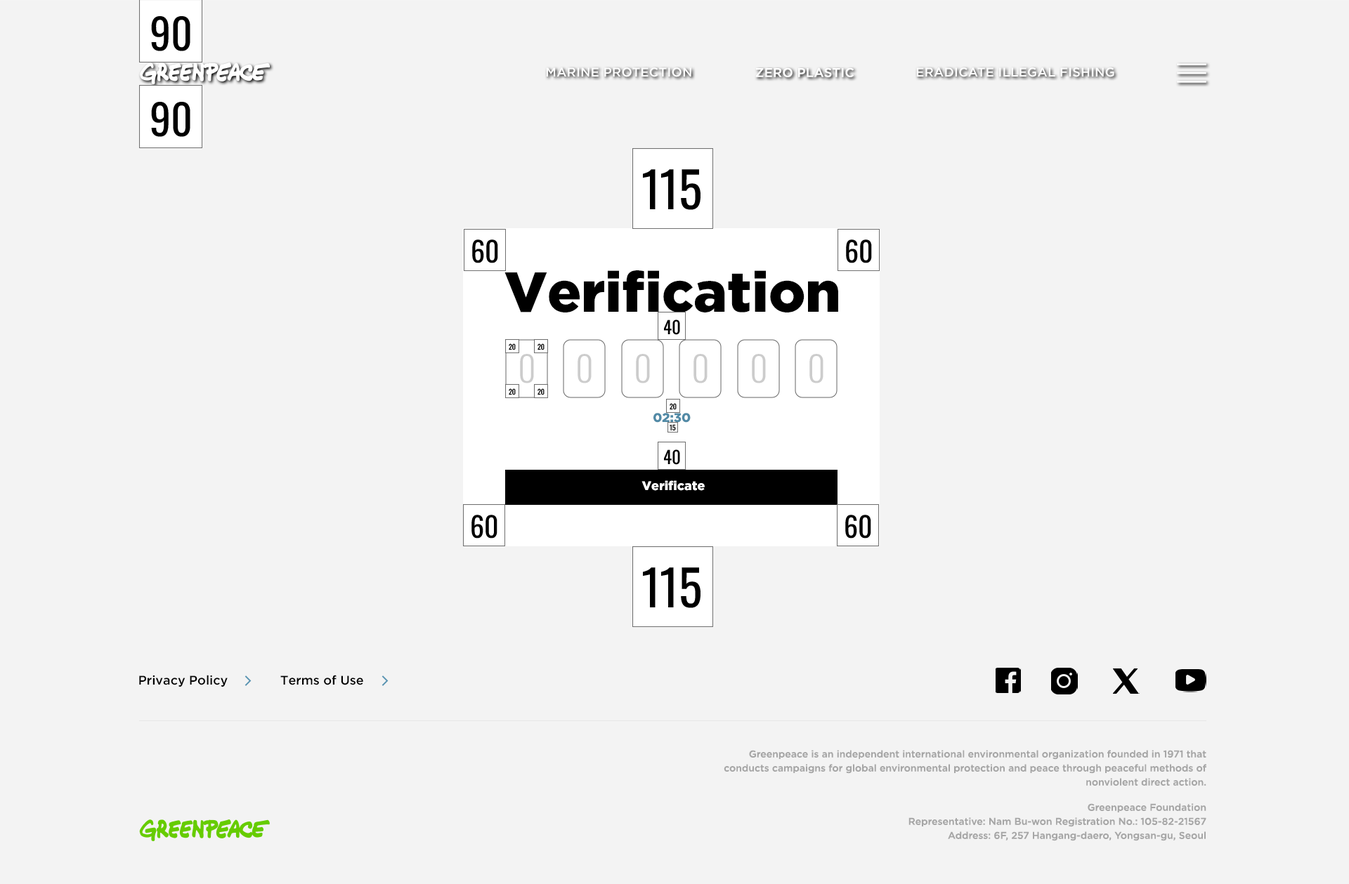
<style>
.page{position:relative;width:1349px;height:884px;background:#f3f3f3}
.page>*{position:absolute;margin:0}
.t1{font:12.6px "GothamPro-Medium";color:#ffffff;text-transform:uppercase}
.t2{font:56.2px "GothamPro-Black";color:#000000}
.t3{font:35.1px "Oswald-Light";color:#cccccc}
.t4{font:12.6px "GothamPro-Black";color:#518aa6}
.t5{font:12.6px "GothamPro-Black";color:#ffffff}
.t6{font:12.6px "GothamPro-Medium";color:#000000}
.t7{font:9.8px/14px "GothamPro-Medium";color:#a6a6a6}
</style>
<div class="page">
<p class="t1" style="left:546px;top:67px;width:145px;height:10px">Marine protection</p>
<p class="t1" style="left:755px;top:67px;width:99px;height:10px">Zero plastic</p>
<p class="t1" style="left:916px;top:67px;width:198px;height:10px">Eradicate illegal fishing</p>
<p class="t2" style="left:504px;top:270px;width:334px;height:43px">Verification</p>
<p class="t3" style="left:520px;top:354px;width:14px;height:29px">0</p>
<p class="t3" style="left:577px;top:354px;width:14px;height:29px">0</p>
<p class="t3" style="left:636px;top:354px;width:14px;height:29px">0</p>
<p class="t3" style="left:693px;top:354px;width:14px;height:29px">0</p>
<p class="t3" style="left:752px;top:354px;width:14px;height:29px">0</p>
<p class="t3" style="left:809px;top:354px;width:14px;height:29px">0</p>
<p class="t4" style="left:653px;top:413px;width:37px;height:10px">02:30</p>
<p class="t5" style="left:641px;top:480px;width:63px;height:11px">Verificate</p>
<p class="t6" style="left:139px;top:675px;width:89px;height:12px">Privacy Policy</p>
<p class="t6" style="left:280px;top:675px;width:83px;height:10px">Terms of Use</p>
<p class="t7" style="left:723px;top:750px;width:483px;height:36px;text-align:right">Greenpeace is an independent international environmental organization founded in 1971 that conducts campaigns for global environmental protection and peace through peaceful methods of nonviolent direct action.</p>
<p class="t7" style="left:908px;top:803px;width:298px;height:38px;text-align:right">Greenpeace Foundation<br>Representative: Nam Bu-won Registration No.: 105-82-21567<br>Address: 6F, 257 Hangang-daero, Yongsan-gu, Seoul</p>
</div>
